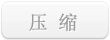
<style>
.page{position:relative;width:110px;height:40px}
.page>*{position:absolute;margin:0}
.t1{font:19.2px "SimSun";letter-spacing:0.01em;color:#9b9b9b;font-weight:bold}
</style>
<div class="page">
<p class="t1" style="left:29px;top:13px;width:48px;height:19px">压 缩</p>
</div>
